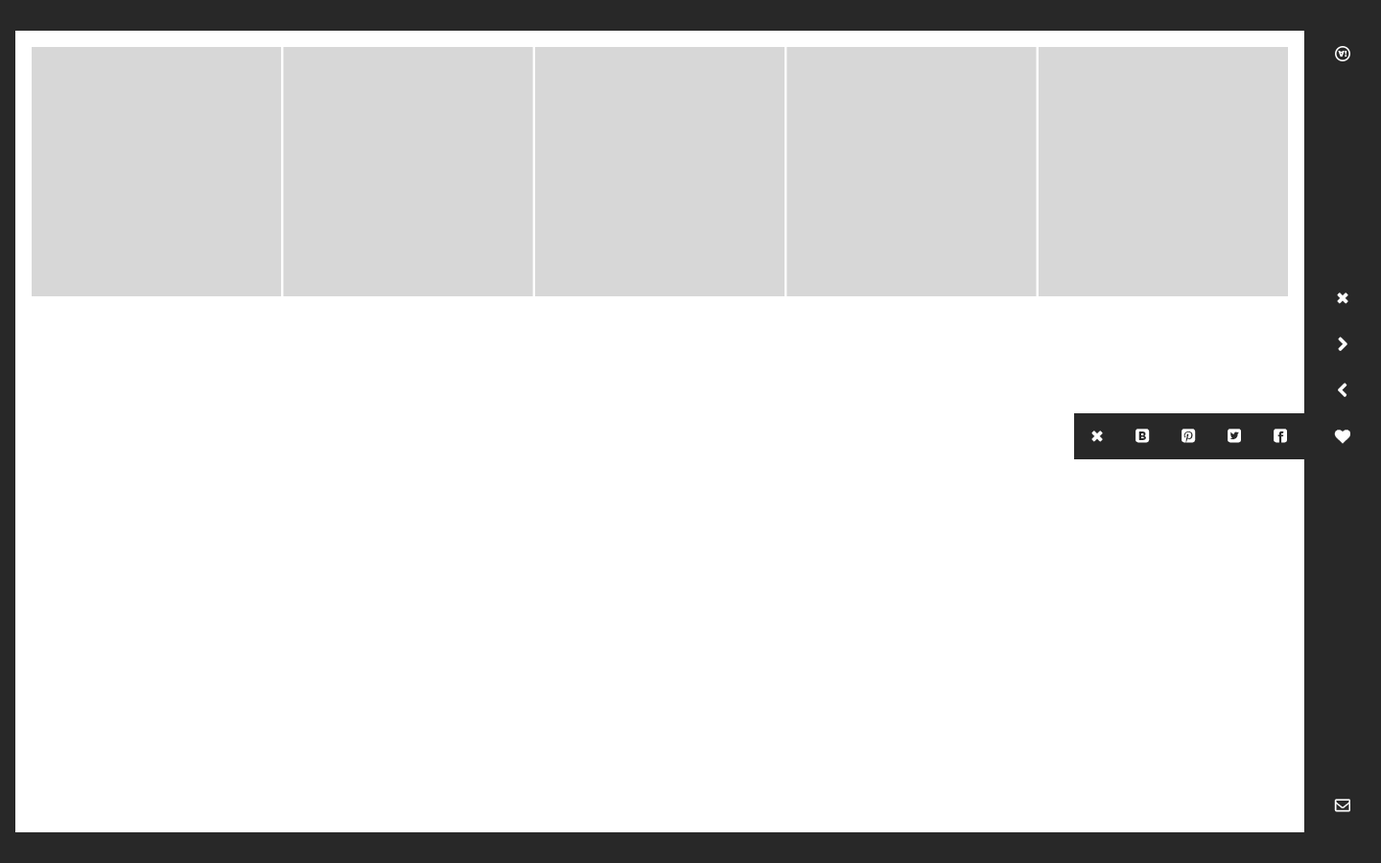
<style>
.page{position:relative;width:1381px;height:863px;background:#ffffff}
.page>*{position:absolute;margin:0}
.t1{font:11.5px "HelveticaNeueCyr-Heavy";color:#282828}
</style>
<div class="page">
<p class="t1" style="left:1139px;top:432px;width:7px;height:8px">В</p>
</div>
